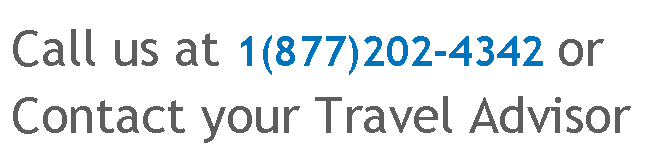
<style>
.page{position:relative;width:649px;height:163px;background:#ffffff}
.page>*{position:absolute;margin:0}
.t1{font:50px/66.7px "TrebuchetMS";color:#5e5e5e}
.t2{font:41.7px/66.7px "TrebuchetMS-Bold";color:#0073bb}
</style>
<div class="page">
<p class="t1" style="left:13px;top:29px;width:618px;height:114px">Call us at <span class="t2">1(877)202-4342 </span>or<br>Contact your Travel Advisor</p>
</div>
